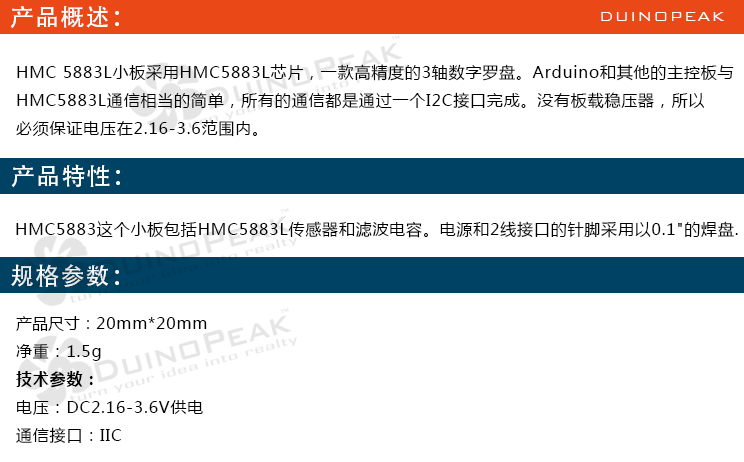
<style>
.page{position:relative;width:744px;height:462px;background:#ffffff}
.page>*{position:absolute;margin:0}
.t1{font:24px "AdobeHeitiStd-Regular";letter-spacing:0.05em;color:#ffffff}
.t2{font:18px "BankGothicBT-Light";letter-spacing:0.05em;color:#ffffff}
.t3{font:16px "MicrosoftYaHei";letter-spacing:0.05em;color:#000000}
.t4{font:24px "AdobeHeitiStd-Regular";letter-spacing:0.05em}
.t5{font:16px "MicrosoftYaHei";color:#000000}
.t6{font:16px "MicrosoftYaHei-Bold";letter-spacing:0.05em;color:#000000}
</style>
<div class="page">
<p class="t1" style="left:10px;top:6px;width:109px;height:23px">产品概述：</p>
<p class="t2" style="left:601px;top:12px;width:124px;height:9px">DUINOPEAK</p>
<p class="t3" style="left:16px;top:64px;width:718px;height:73px">HMC 5883L小板采用HMC5883L芯片，一款高精度的3轴数字罗盘。Arduino和其他的主控板与<br>HMC5883L通信相当的简单，所有的通信都是通过一个I2C接口完成。没有板载稳压器，所以<br>必须保证电压在2.16-3.6范围内。</p>
<p class="t1" style="left:11px;top:164px;width:109px;height:24px">产品特性：</p>
<p class="t3" style="left:16px;top:221px;width:722px;height:17px">HMC5883这个小板包括HMC5883L传感器和滤波电容。电源和2线接口的针脚采用以0.1"的焊盘.</p>
<p class="t4" style="left:11px;top:264px;width:108px;height:23px">规格参数：</p>
<p class="t3" style="left:16px;top:316px;width:191px;height:127px"><span class="t5">产品尺寸：</span>20mm*20mm<br>净重：1.5g<br><span class="t6">技术参数：<br></span>电压：DC2.16-3.6V供电<br>通信接口：IIC</p>
</div>
